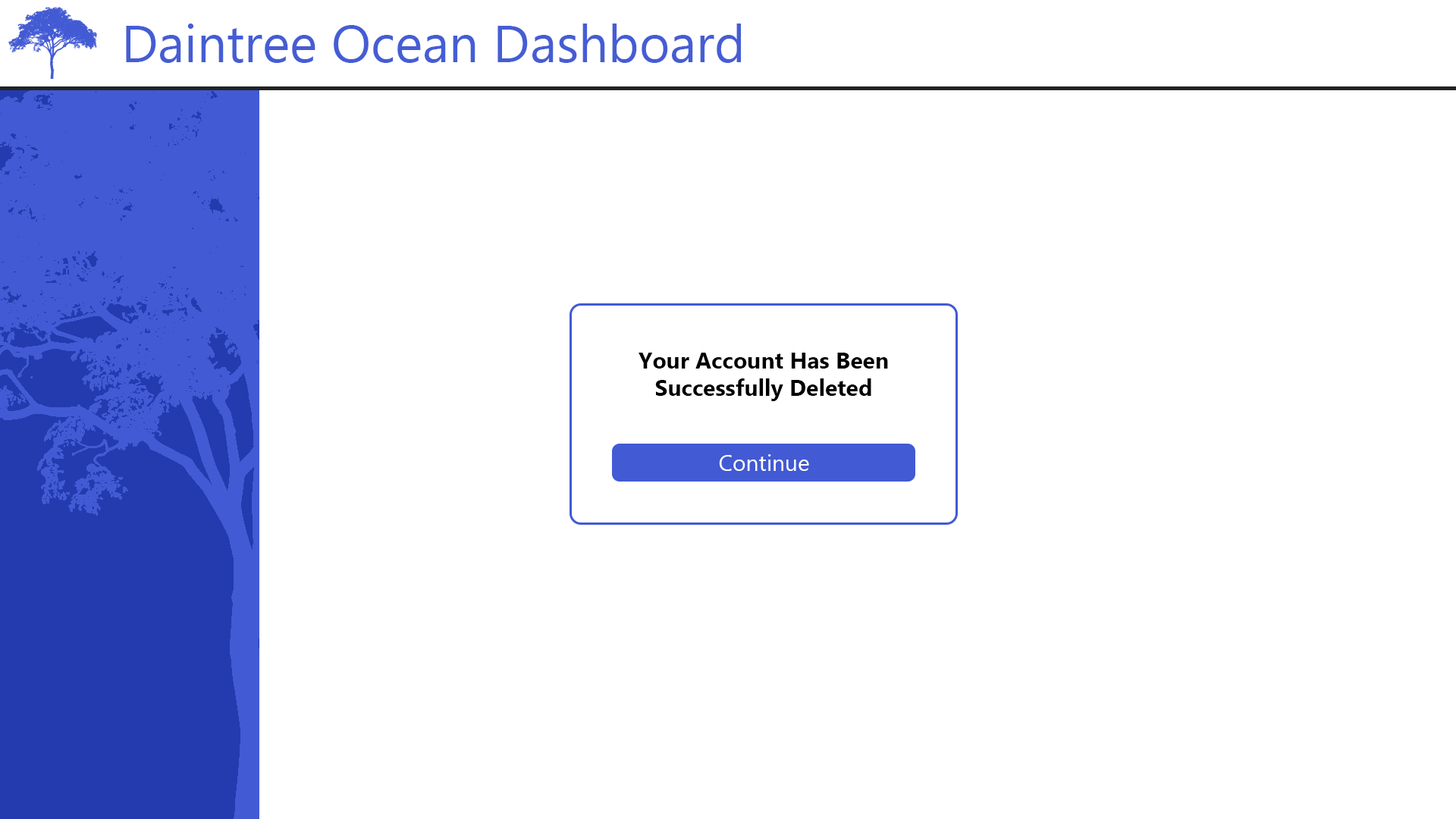
<style>
.page{position:relative;width:1456px;height:819px;background:#ffffff}
.page>*{position:absolute;margin:0}
.t1{font:52.3px "MyanmarText";color:#455dd4}
.t2{font:22.7px "MyanmarText-Bold";color:#000000}
.t3{font:22.7px "MyanmarText";color:#ffffff}
</style>
<div class="page">
<p class="t1" style="left:126px;top:24px;width:615px;height:39px">Daintree Ocean Dashboard</p>
<p class="t2" style="left:639px;top:353px;width:249px;height:48px;text-align:center">Your Account Has Been<br>Successfully Deleted</p>
<p class="t3" style="left:719px;top:454px;width:90px;height:17px">Continue</p>
</div>
